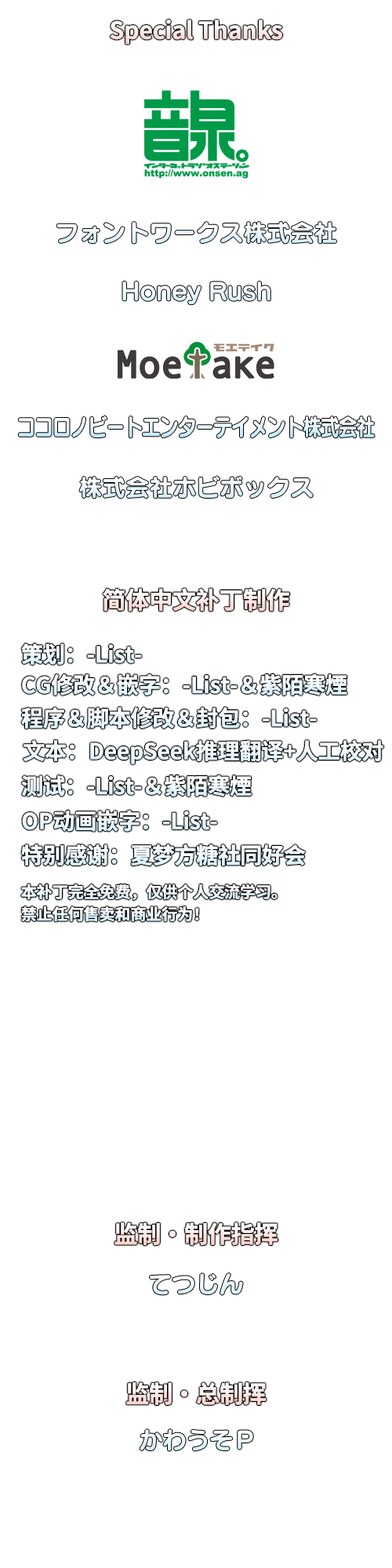
<style>
.page{position:relative;width:392px;height:1568px;background:#ffffff}
.page>*{position:absolute;margin:0}
.t1{font:23.5px "SourceHanSansSC-Bold";letter-spacing:-0.03em;color:#ffecea;font-weight:bold}
.t2{font:22px "SourceHanSansSC-Bold";letter-spacing:-0.03em;color:#eef9ff;font-weight:bold}
.t3{font:22px "SourceHanSansSC-Bold";letter-spacing:-0.03em;color:#ecf8ff;font-weight:bold}
.t4{font:22px "SourceHanSansSC-Bold";letter-spacing:-0.03em;color:#eff9ff;font-weight:bold}
.t5{font:15.7px "SourceHanSansSC-Bold";letter-spacing:-0.03em;color:#eff9ff;font-weight:bold}
.t6{font:15.7px "SourceHanSansSC-Bold";letter-spacing:-0.03em;color:#eef9ff;font-weight:bold}
.t7{font:23.5px "SourceHanSansSC-Bold";letter-spacing:-0.03em;color:#ffeae7;font-weight:bold}
</style>
<div class="page">
<p class="t1" style="left:103px;top:588px;width:186px;height:24px">简体中文补丁制作</p>
<p class="t2" style="left:22px;top:673px;width:325px;height:22px">CG修改＆嵌字：-List-＆紫陌寒煙</p>
<p class="t3" style="left:21px;top:707px;width:296px;height:22px">程序＆脚本修改＆封包：-List-</p>
<p class="t4" style="left:23px;top:740px;width:360px;height:24px">文本：DeepSeek推理翻译+人工校对</p>
<p class="t2" style="left:21px;top:775px;width:231px;height:22px">测试：-List-＆紫陌寒煙</p>
<p class="t3" style="left:22px;top:810px;width:195px;height:22px">OP动画嵌字：-List-</p>
<p class="t2" style="left:21px;top:844px;width:285px;height:22px">特别感谢：夏梦方糖社同好会</p>
<p class="t5" style="left:21px;top:884px;width:257px;height:16px">本补丁完全免费，仅供个人交流学习。</p>
<p class="t6" style="left:21px;top:906px;width:178px;height:16px">禁止任何售卖和商业行为！</p>
<p class="t7" style="left:114px;top:1222px;width:164px;height:24px">监制·制作指挥</p>
<p class="t7" style="left:126px;top:1382px;width:141px;height:23px">监制・总制挥</p>
</div>
